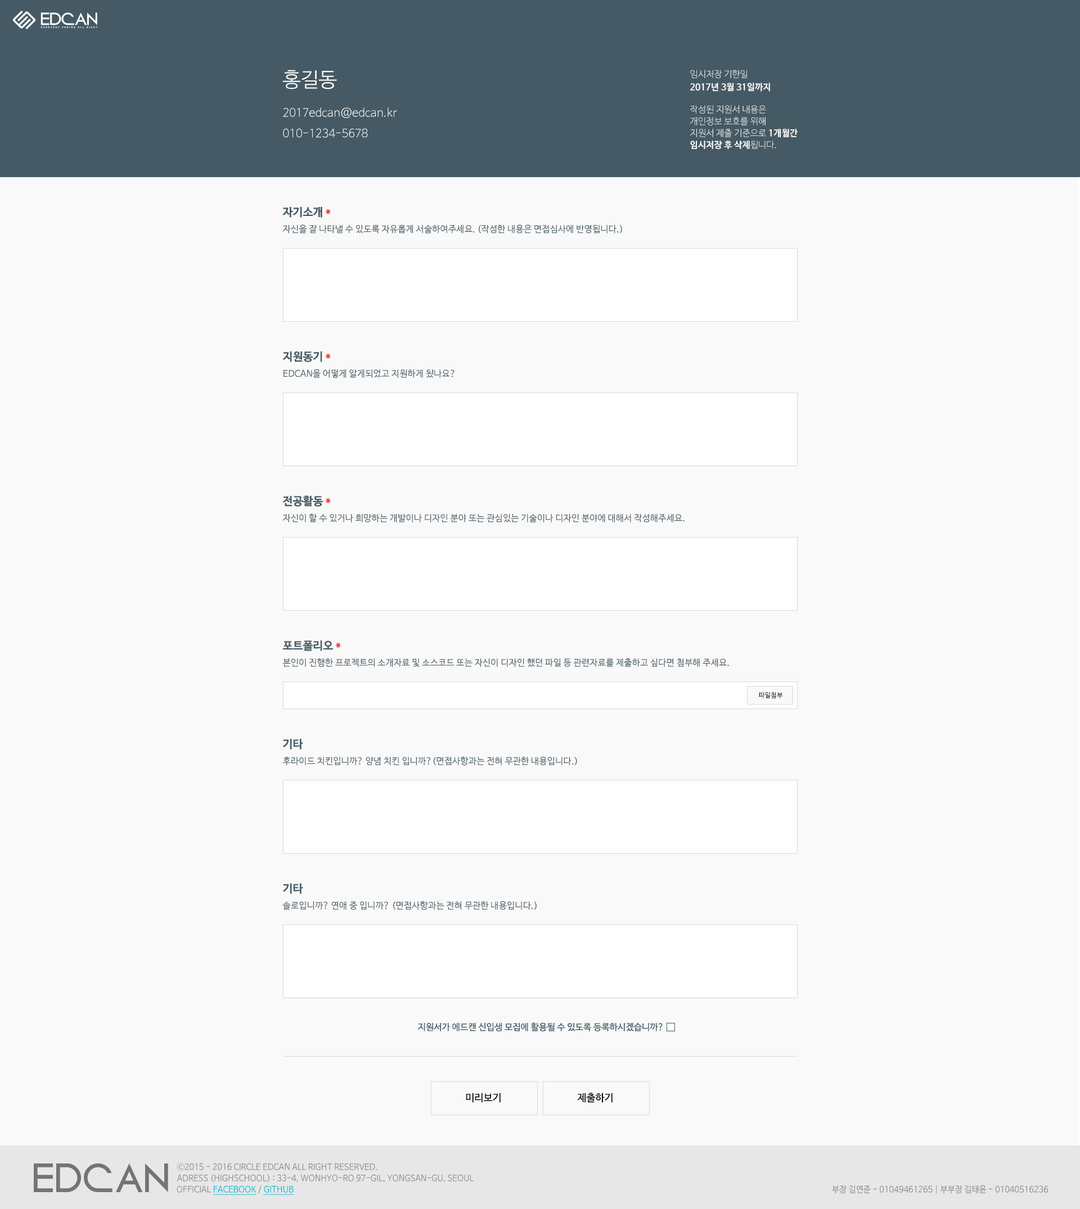
<style>
.page{position:relative;width:1080px;height:1209px;background:#f9f9f9}
.page>*{position:absolute;margin:0}
.t1{font:20.1px "NanumBarunGothicLight";color:#ffffff}
.t2{font:8.9px "NanumBarunGothicLight";color:#ffffff}
.t3{font:8.9px "NanumBarunGothicBold";color:#ffffff}
.t4{font:11.2px "NanumBarunGothicLight";color:#ffffff}
.t5{font:8.9px/11.8px "NanumBarunGothicLight";color:#ffffff}
.t6{font:8.9px/11.8px "NanumBarunGothicBold";color:#ffffff}
.t7{font:11.2px "NanumBarunGothicBold";color:#455a64}
.t8{font:11.2px "NanumBarunGothicBold";color:#f33d3d}
.t9{font:9px "NanumBarunGothic";color:#455a64}
.t10{font:6.7px "NanumBarunGothic";color:#000000}
.t11{font:10.1px "NanumBarunGothic";color:#000000}
.t12{font:30.1px "Circo";color:#747474}
.t13{font:8.6px "NanumBarunGothic";color:#8f8f8f}
.t14{font:8.6px "NanumBarunGothic";color:#00b8d4;text-decoration:underline}
</style>
<div class="page">
<p class="t1" style="left:282px;top:70px;width:55px;height:19px">홍길동</p>
<p class="t2" style="left:690px;top:70px;width:58px;height:9px">임시저장 기한일</p>
<p class="t3" style="left:690px;top:83px;width:80px;height:9px">2017년 3월 31일까지</p>
<p class="t4" style="left:283px;top:107px;width:114px;height:11px">2017edcan@edcan.kr</p>
<p class="t5" style="left:690px;top:105px;width:108px;height:44px">작성된 지원서 내용은<br>개인정보 보호를 위해<br>지원서 제출 기준으로 <span class="t6">1개월간<br>임시저장 후 삭제</span>됩니다.</p>
<p class="t4" style="left:283px;top:128px;width:85px;height:10px">010-1234-5678</p>
<p class="t7" style="left:282px;top:206px;width:49px;height:12px">자기소개 <span class="t8">*</span></p>
<p class="t9" style="left:282px;top:224px;width:340px;height:9px">자신을 잘 나타낼 수 있도록 자유롭게 서술하여주세요. (작성한 내용은 면접심사에 반영됩니다.)</p>
<p class="t7" style="left:282px;top:351px;width:49px;height:11px">지원동기 <span class="t8">*</span></p>
<p class="t9" style="left:283px;top:369px;width:171px;height:9px">EDCAN을 어떻게 알게되었고 지원하게 됬나요?</p>
<p class="t7" style="left:282px;top:496px;width:49px;height:11px">전공활동 <span class="t8">*</span></p>
<p class="t9" style="left:282px;top:514px;width:403px;height:9px">자신이 할 수 있거나 희망하는 개발이나 디자인 분야 또는 관심있는 기술이나 디자인 분야에 대해서 작성해주세요.</p>
<p class="t7" style="left:282px;top:640px;width:59px;height:11px">포트폴리오 <span class="t8">*</span></p>
<p class="t9" style="left:282px;top:658px;width:447px;height:9px">본인이 진행한 프로젝트의 소개자료 및 소스코드 또는 자신이 디자인 했던 파일 등 관련자료를 제출하고 싶다면 첨부해 주세요.</p>
<p class="t10" style="left:758px;top:692px;width:25px;height:7px">파일첨부</p>
<p class="t7" style="left:282px;top:739px;width:21px;height:11px">기타</p>
<p class="t9" style="left:282px;top:757px;width:295px;height:9px">후라이드 치킨입니까? 양념 치킨 입니까?(면접사항과는 전혀 무관한 내용입니다.)</p>
<p class="t7" style="left:282px;top:883px;width:21px;height:11px">기타</p>
<p class="t9" style="left:282px;top:901px;width:255px;height:9px">솔로입니까? 연애 중 입니까? (면접사항과는 전혀 무관한 내용입니다.)</p>
<p class="t9" style="left:417px;top:1023px;width:246px;height:9px">지원서가 에드캔 신입생 모집에 활용될 수 있도록 등록하시겠습니까?</p>
<p class="t11" style="left:466px;top:1093px;width:35px;height:10px">미리보기</p>
<p class="t11" style="left:577px;top:1093px;width:36px;height:10px">제출하기</p>
<p class="t12" style="left:34px;top:1164px;width:134px;height:28px">EDCAN</p>
<p class="t13" style="left:177px;top:1163px;width:200px;height:9px">ⓒ2015 - 2016 CIRCLE EDCAN ALL RIGHT RESERVED.</p>
<p class="t13" style="left:177px;top:1174px;width:297px;height:9px">ADRESS (HIGHSCHOOL) : 33-4, WONHYO-RO 97-GIL, YONGSAN-GU, SEOUL</p>
<p class="t13" style="left:177px;top:1186px;width:117px;height:9px">OFFICIAL <span class="t14">FACEBOOK </span>/ <span class="t14">GITHUB</span></p>
<p class="t13" style="left:832px;top:1185px;width:216px;height:9px">부장 김연준 - 01049461265 | 부부장 김태윤 - 01040516236</p>
</div>
